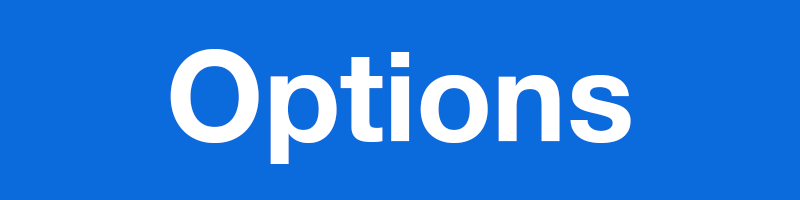
<style>
.page{position:relative;width:800px;height:200px;background:#0b6bdc}
.page>*{position:absolute;margin:0}
.t1{font:125px "HelveticaNeue-Bold";color:#ffffff}
</style>
<div class="page">
<p class="t1" style="left:170px;top:49px;width:461px;height:115px">Options</p>
</div>
